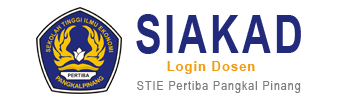
<style>
.page{position:relative;width:350px;height:100px;background:#ffffff}
.page>*{position:absolute;margin:0}
.t1{font:53px "Arial-BoldMT";letter-spacing:0.075em;color:#222a7b;scale:0.75 1}
.t2{font:13px "Arial-BoldMT";letter-spacing:0.075em;color:#f39c12}
.t3{font:13px "ArialNarrow";letter-spacing:0.075em;color:#7f7c7c}
</style>
<div class="page">
<p class="t1" style="left:136px;top:14px;width:165px;height:40px">SIAKAD</p>
<p class="t2" style="left:167px;top:61px;width:88px;height:13px">Login Dosen</p>
<p class="t3" style="left:137px;top:81px;width:164px;height:12px">STIE Pertiba Pangkal Pinang</p>
</div>
